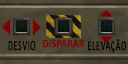
<style>
.page{position:relative;width:128px;height:64px}
.page>*{position:absolute;margin:0}
.t1{font:14.1px "Calibri";letter-spacing:0.05em;color:#000000;text-transform:uppercase;scale:0.57 1}
.t2{font:11.3px "Calibri";color:#760807;font-weight:bold;scale:0.88 1}
.t3{font:13.4px "Calibri";letter-spacing:0.05em;color:#000000;text-transform:uppercase;scale:0.6 1}
</style>
<div class="page">
<p class="t1" style="left:8px;top:40px;width:28px;height:11px">Desvio</p>
<p class="t2" style="left:43px;top:39px;width:42px;height:9px">DISPARAR</p>
<p class="t3" style="left:88px;top:39px;width:39px;height:14px">Elevação</p>
</div>
